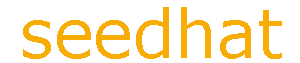
<style>
.page{position:relative;width:300px;height:63px;background:#ffffff}
.page>*{position:absolute;margin:0}
.t1{font:66.5px "Verdana";color:#f8ad06}
</style>
<div class="page">
<p class="t1" style="left:23px;top:7px;width:259px;height:52px">seedhat</p>
</div>
